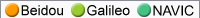
<style>
.page{position:relative;width:200px;height:18px;background:#fafafa}
.page>*{position:absolute;margin:0}
.t1{font:14px "ArialMT";color:#000000}
</style>
<div class="page">
<p class="t1" style="left:87px;top:5px;width:43px;height:11px">Galileo</p>
<p class="t1" style="left:153px;top:5px;width:41px;height:11px">NAVIC</p>
</div>
